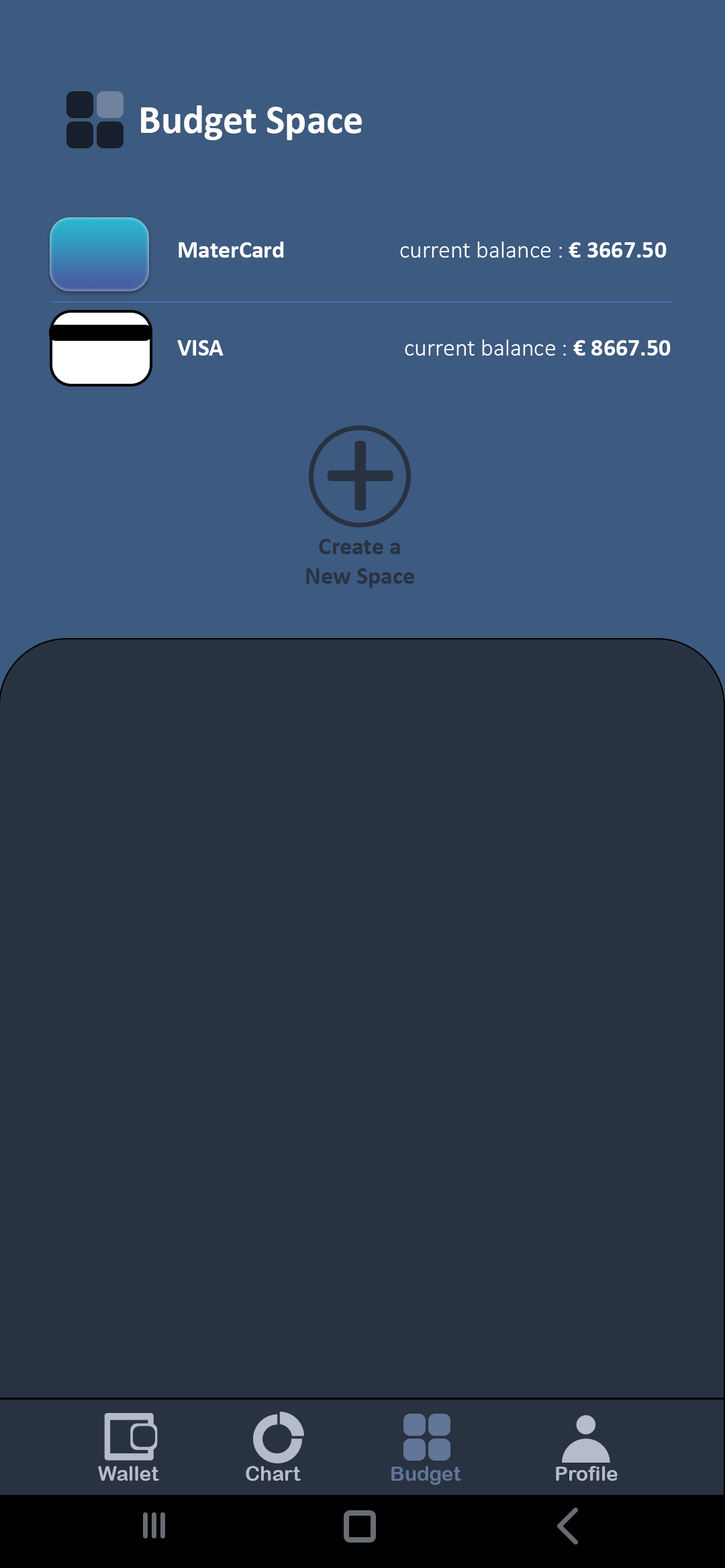
<style>
.page{position:relative;width:725px;height:1568px;background:#293241}
.page>*{position:absolute;margin:0}
.t1{font:40.3px "Calibri-Bold";color:#ffffff}
.t2{font:24.2px "Calibri-Light";color:#ffffff}
.t3{font:24.2px "Calibri-Bold";color:#ffffff}
.t4{font:152.8px "Calibri";color:#293241}
.t5{font:24.2px "Calibri-Bold";color:#293241}
.t6{font:20.1px "ArialRoundedMTBold";color:#b4bcc9}
.t7{font:20.1px "ArialRoundedMTBold";color:#617698}
</style>
<div class="page">
<p class="t1" style="left:141px;top:105px;width:221px;height:35px">Budget Space</p>
<p class="t2" style="left:178px;top:242px;width:488px;height:16px"><span class="t3">MaterCard                     </span>current balance : <span class="t3">€ 3667.50</span></p>
<p class="t2" style="left:177px;top:339px;width:493px;height:17px"><span class="t3">VISA                                 </span>current balance : <span class="t3">€ 8667.50</span></p>
<p class="t4" style="left:327px;top:441px;width:66px;height:70px">+</p>
<p class="t5" style="left:306px;top:539px;width:108px;height:49px;text-align:center">Create a <br>New Space</p>
<p class="t6" style="left:98px;top:1466px;width:61px;height:15px">Wallet</p>
<p class="t6" style="left:246px;top:1466px;width:55px;height:15px">Chart</p>
<p class="t7" style="left:391px;top:1466px;width:70px;height:19px">Budget</p>
<p class="t6" style="left:556px;top:1466px;width:61px;height:15px">Profile</p>
</div>
